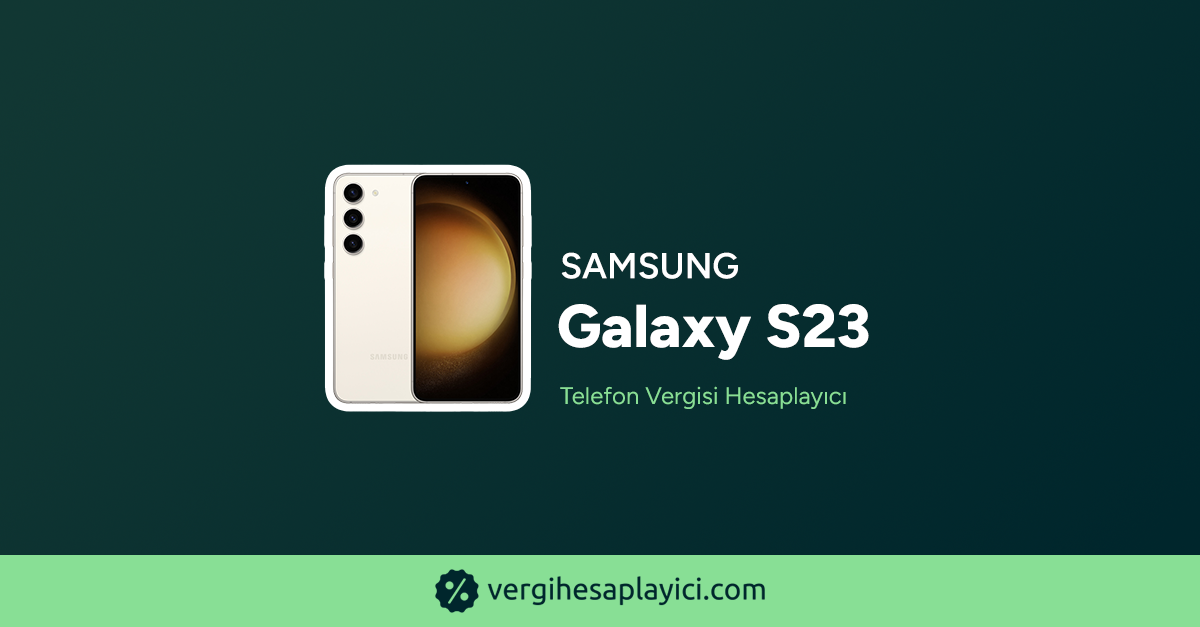
<style>
.page{position:relative;width:1200px;height:627px}
.page>*{position:absolute;margin:0}
.t1{font:36px "Figtree-SemiBold";color:#ffffff;text-transform:uppercase;font-weight:bold}
.t2{font:60.3px "Figtree-ExtraBold";color:#ffffff;font-weight:bold}
.t3{font:24px "Figtree-Regular";color:#88df95;font-weight:bold}
</style>
<div class="page">
<p class="t1" style="left:561px;top:252px;width:177px;height:27px">Samsung</p>
<p class="t2" style="left:558px;top:304px;width:311px;height:56px">Galaxy S23</p>
<p class="t3" style="left:560px;top:386px;width:286px;height:23px">Telefon Vergisi Hesaplayıcı</p>
</div>
